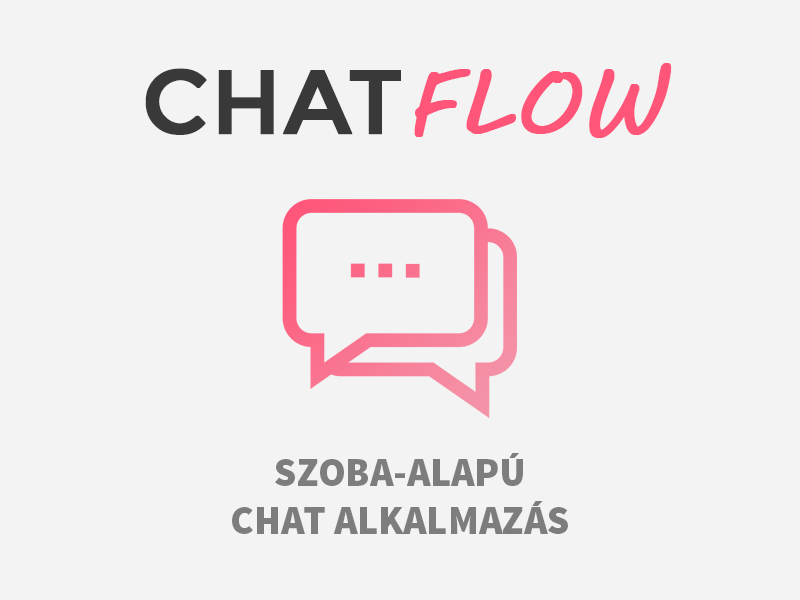
<style>
.page{position:relative;width:800px;height:600px;background:#f3f3f3}
.page>*{position:absolute;margin:0}
.t1{font:90px "Montserrat-Regular";color:#393939;text-transform:uppercase;font-weight:bold}
.t2{font:90px "MVBoli";color:#ff5579;text-transform:uppercase;font-weight:bold}
.t3{font:40px "SourceSansPro-Black";color:#7d7d7d;text-transform:uppercase}
</style>
<div class="page">
<p class="t1" style="left:145px;top:63px;width:527px;height:75px">chat<span class="t2">flow</span></p>
<p class="t3" style="left:232px;top:453px;width:336px;height:81px;text-align:center">szoba-alapú<br>chat alkalmazás</p>
</div>
